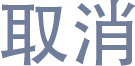
<style>
.page{position:relative;width:135px;height:66px;background:#ffffff}
.page>*{position:absolute;margin:0}
.t1{font:72px "AdobeHeitiStd-Regular";color:#707e9b}
</style>
<div class="page">
<p class="t1" style="left:1px;top:0px;width:135px;height:66px">取消</p>
</div>
